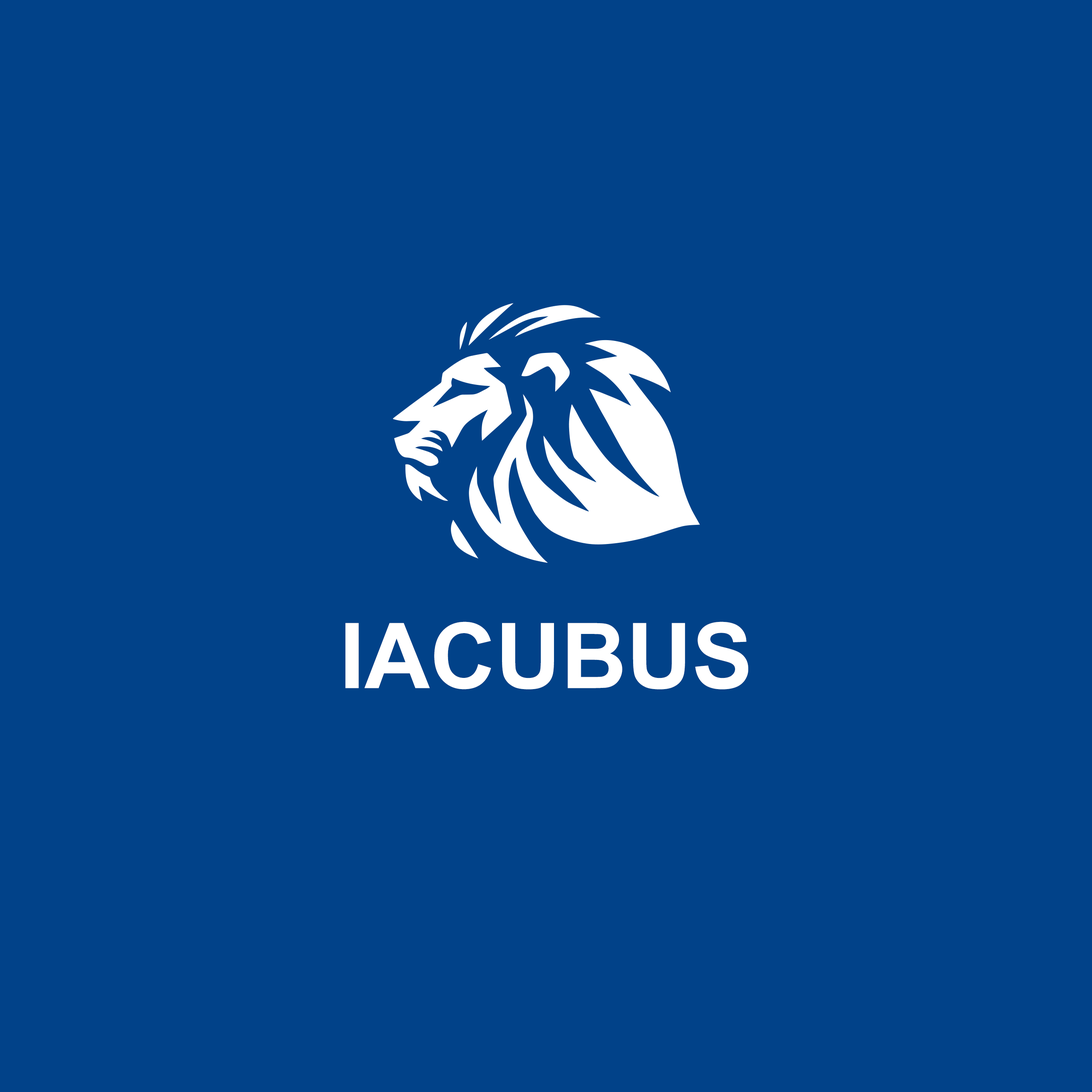
<style>
.page{position:relative;width:1092px;height:1092px;background:#014289}
.page>*{position:absolute;margin:0}
.t1{font:90.7px "Arial-BoldMT";color:#ffffff}
</style>
<div class="page">
<p class="t1" style="left:345px;top:622px;width:403px;height:67px">IACUBUS</p>
</div>
